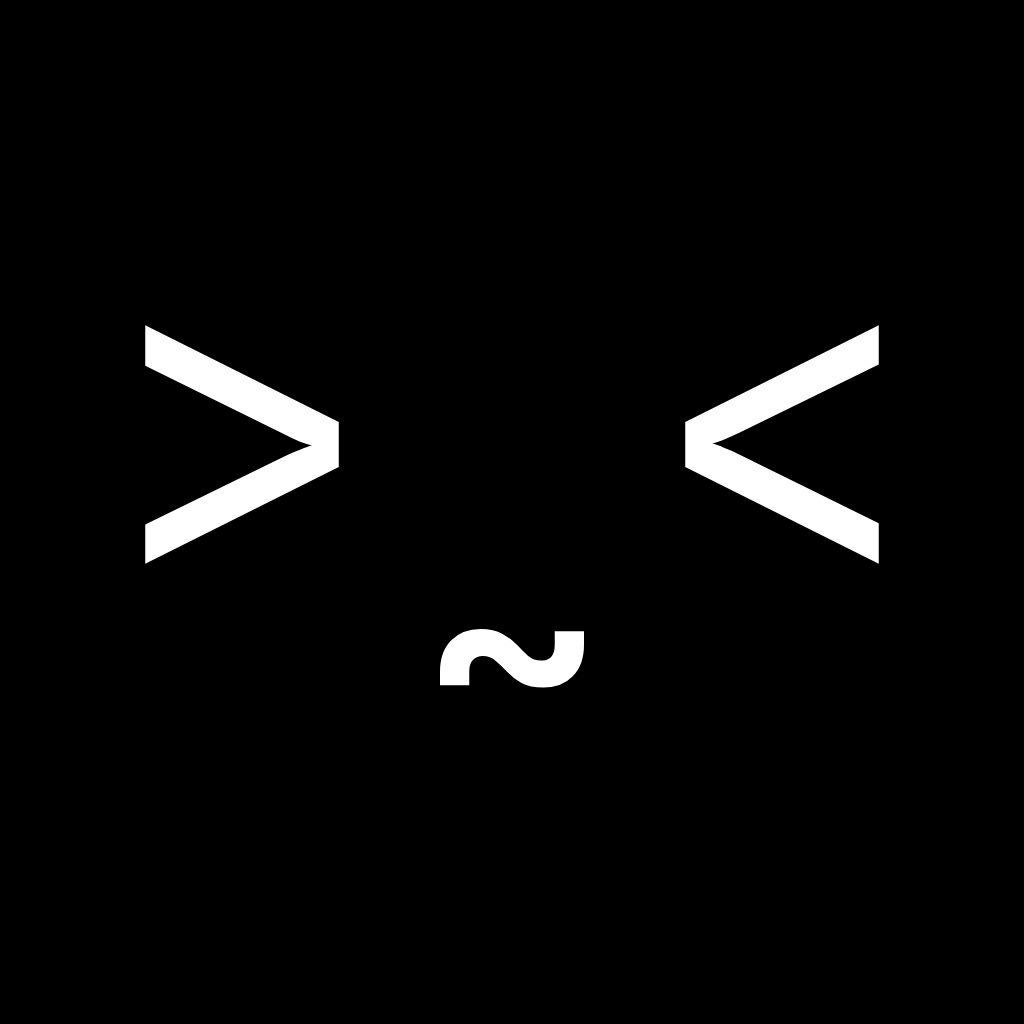
<style>
.page{position:relative;width:1024px;height:1024px;background:#000000}
.page>*{position:absolute;margin:0}
.t1{font:450px "JetBrainsMonoRoman-Regular";color:#ffffff}
</style>
<div class="page">
<p class="t1" style="left:145px;top:325px;width:734px;height:363px">&gt;˷&lt;</p>
</div>
